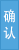
<style>
.page{position:relative;width:19px;height:50px;background:#52a6dd}
.page>*{position:absolute;margin:0}
.t1{font:14px "AdobeHeitiStd-Regular";color:#ffffff;scale:0.9 1}
</style>
<div class="page">
<p class="t1" style="left:3px;top:9px;width:13px;height:31px">确<br>认</p>
</div>
